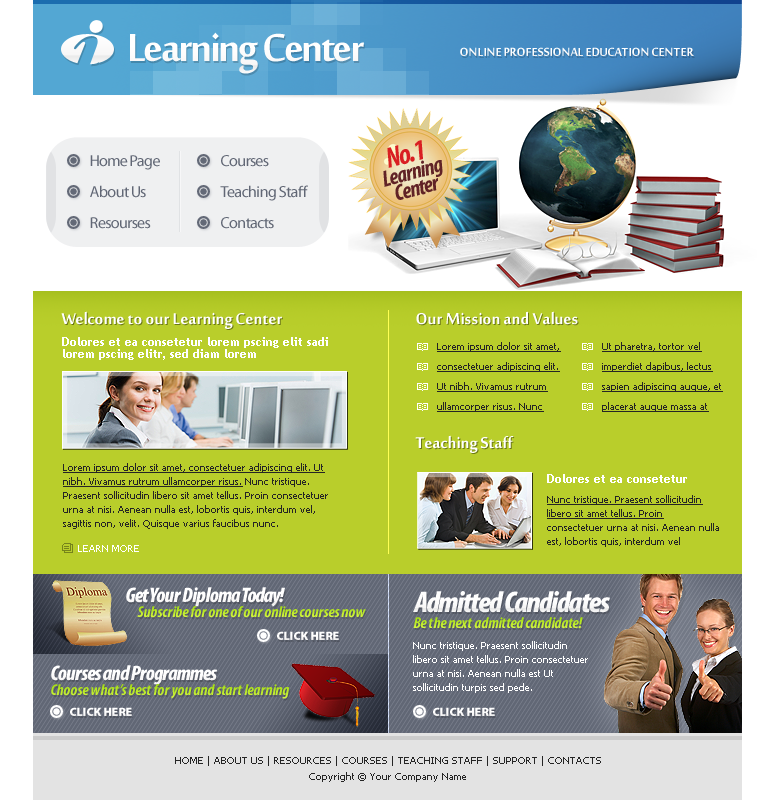
<style>
.page{position:relative;width:775px;height:800px;background:#b9ce2b}
.page>*{position:absolute;margin:0}
.t1{font:60px "MoolBoran";letter-spacing:-0.04em;color:#fdfdfd}
.t2{font:18px "MoolBoran";color:#fefefe}
.t3{font:29px "MyriadPro-BoldCondIt";letter-spacing:-0.04em;color:#d91f22}
.t4{font:16px "MyriadPro-Regular";letter-spacing:-0.04em;color:#616775}
.t5{font:23px "MyriadPro-BoldCondIt";letter-spacing:-0.04em;color:#612326}
.t6{font:24px "MoolBoran";color:#ffffff}
.t7{font:12px/12px "TrebuchetMS-Bold";color:#ffffff}
.t8{font:10px/20px "Tahoma";color:#252525;text-decoration:underline}
.t9{font:10px/14px "Tahoma";color:#252525}
.t10{font:10px/14px "Tahoma";color:#252525;text-decoration:underline}
.t11{font:12px "TrebuchetMS-Bold";color:#ffffff}
.t12{font:10px "Tahoma";color:#ffffff}
.t13{font:21px "MyriadPro-BlackCondIt";letter-spacing:-0.04em;color:#fdfdfd}
.t14{font:30px "MyriadPro-BlackCondIt";letter-spacing:-0.04em;color:#fafafa}
.t15{font:16px "MyriadPro-BoldCondIt";color:#beeb2a}
.t16{font:12px "MyriadPro-Black";color:#ffffff}
.t17{font:10px/14px "Tahoma";color:#ffffff}
.t18{font:16px "MyriadPro-BoldCondIt";color:#b7e825}
.t19{font:10px/16px "Tahoma";color:#252525}
</style>
<div class="page">
<p class="t1" style="left:130px;top:32px;width:234px;height:42px">Learning Center</p>
<p class="t2" style="left:460px;top:47px;width:234px;height:9px">ONLINE PROFESSIONAL EDUCATION CENTER</p>
<p class="t3" style="left:387px;top:140px;width:36px;height:28px;rotate:-15deg">No.1</p>
<p class="t4" style="left:90px;top:155px;width:70px;height:15px">Home Page</p>
<p class="t4" style="left:221px;top:155px;width:48px;height:12px">Courses</p>
<p class="t5" style="left:383px;top:160px;width:60px;height:27px;rotate:-15deg">Learning</p>
<p class="t4" style="left:90px;top:185px;width:56px;height:13px">About Us</p>
<p class="t4" style="left:220px;top:185px;width:88px;height:16px">Teaching Staff</p>
<p class="t5" style="left:395px;top:178px;width:43px;height:22px;rotate:-15deg">Center</p>
<p class="t4" style="left:90px;top:217px;width:61px;height:12px">Resourses</p>
<p class="t4" style="left:221px;top:217px;width:53px;height:12px">Contacts</p>
<p class="t6" style="left:61px;top:311px;width:221px;height:18px">Welcome to our Learning Center</p>
<p class="t6" style="left:416px;top:311px;width:162px;height:14px">Our Mission and Values</p>
<p class="t7" style="left:62px;top:337px;width:266px;height:23px">Dolores et ea consetetur lorem pscing elit sadi lorem pscing elitr, sed diam lorem</p>
<p class="t8" style="left:437px;top:342px;width:124px;height:70px">Lorem ipsum dolor sit amet, consectetuer adipiscing elit. Ut nibh. Vivamus rutrum ullamcorper risus. Nunc</p>
<p class="t8" style="left:602px;top:342px;width:121px;height:70px">Ut pharetra, tortor vel imperdiet dapibus, lectus sapien adipiscing augue, et placerat augue massa at</p>
<p class="t6" style="left:415px;top:435px;width:99px;height:18px">Teaching Staff</p>
<p class="t9" style="left:63px;top:463px;width:265px;height:66px"><span class="t10">Lorem ipsum dolor sit amet, consectetuer adipiscing elit. Ut nibh. Vivamus rutrum ullamcorper risus.</span> Nunc tristique. Praesent sollicitudin libero sit amet tellus. Proin consectetuer urna at nisi. Aenean nulla est, lobortis quis, interdum vel, sagittis non, velit. Quisque varius faucibus nunc.</p>
<p class="t11" style="left:547px;top:474px;width:140px;height:9px">Dolores et ea consetetur</p>
<p class="t9" style="left:547px;top:495px;width:172px;height:52px"><span class="t10">Nunc tristique. Praesent sollicitudin libero sit amet tellus. Proin </span>consectetuer urna at nisi. Aenean nulla est, lobortis quis, interdum vel</p>
<p class="t12" style="left:78px;top:545px;width:61px;height:7px">LEARN MORE</p>
<p class="t13" style="left:126px;top:587px;width:159px;height:20px">Get Your Diploma Today!</p>
<p class="t14" style="left:413px;top:591px;width:197px;height:22px">Admitted Candidates</p>
<p class="t15" style="left:137px;top:606px;width:229px;height:12px">Subscribe for one of our online courses now</p>
<p class="t15" style="left:413px;top:617px;width:170px;height:12px">Be the next admitted candidate!</p>
<p class="t16" style="left:277px;top:631px;width:62px;height:9px">CLICK HERE</p>
<p class="t17" style="left:413px;top:641px;width:175px;height:52px">Nunc tristique. Praesent sollicitudin libero sit amet tellus. Proin consectetuer urna at nisi. Aenean nulla est Ut sollicitudin turpis sed pede.</p>
<p class="t13" style="left:51px;top:665px;width:166px;height:20px">Courses and Programmes</p>
<p class="t18" style="left:51px;top:684px;width:239px;height:15px">Choose what’s best for you and start learning</p>
<p class="t16" style="left:70px;top:707px;width:62px;height:9px">CLICK HERE</p>
<p class="t16" style="left:433px;top:707px;width:62px;height:9px">CLICK HERE</p>
<p class="t19" style="left:175px;top:756px;width:426px;height:26px;text-align:center">HOME | ABOUT US | RESOURCES | COURSES | TEACHING STAFF | SUPPORT | CONTACTS<br>Copyright © Your Company Name</p>
</div>
